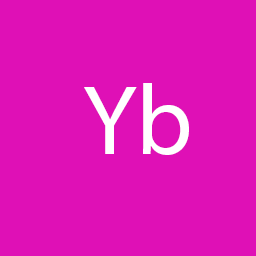
<style>
.page{position:relative;width:256px;height:256px;background:#df10b6}
.page>*{position:absolute;margin:0}
.t1{font:100px "MyriadPro-Regular";color:#ffffff}
</style>
<div class="page">
<p class="t1" style="left:84px;top:83px;width:105px;height:72px">Yb</p>
</div>
